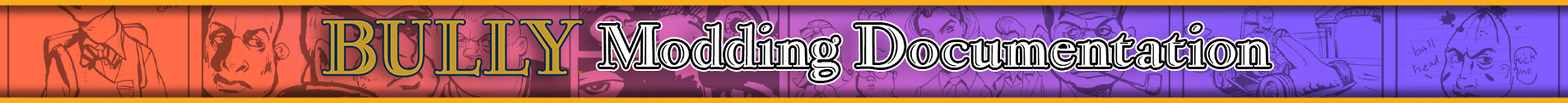
<style>
.page{position:relative;width:1568px;height:103px}
.page>*{position:absolute;margin:0}
.t1{font:62px "NarcissusOpenSG";color:#ffffff}
</style>
<div class="page">
<p class="t1" style="left:599px;top:24px;width:671px;height:57px">Modding Documentation</p>
</div>
